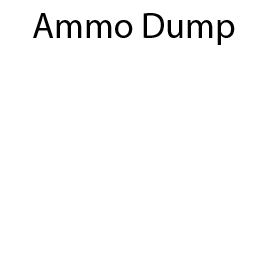
<style>
.page{position:relative;width:256px;height:256px;background:#ffffff}
.page>*{position:absolute;margin:0}
.t1{font:36px "MyriadPro-Regular";color:#000000}
</style>
<div class="page">
<p class="t1" style="left:33px;top:13px;width:202px;height:32px">Ammo Dump</p>
</div>
